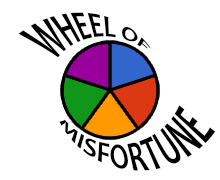
<style>
.page{position:relative;width:220px;height:180px;background:#ffffff}
.page>*{position:absolute;margin:0}
.t1{font:24px "Candara-Bold";color:#000000}
</style>
<div class="page">
<p class="t1" style="left:18px;top:12px;width:133px;height:46px">WHEEL OF</p>
<p class="t1" style="left:59px;top:105px;width:157px;height:66px">MISFORTUNE</p>
</div>
